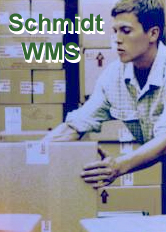
<style>
.page{position:relative;width:166px;height:232px}
.page>*{position:absolute;margin:0}
.t1{font:24px "Arial-BoldMT"}
.t2{font:24px "Arial-BoldMT";color:#336633}
</style>
<div class="page">
<p class="t1" style="left:8px;top:15px;width:95px;height:47px">Schmidt<br>  WMS</p>
<p class="t2" style="left:8px;top:13px;width:95px;height:47px">Schmidt<br>  WMS</p>
<p class="t1" style="left:10px;top:16px;width:95px;height:47px">Schmidt<br>  WMS</p>
</div>
